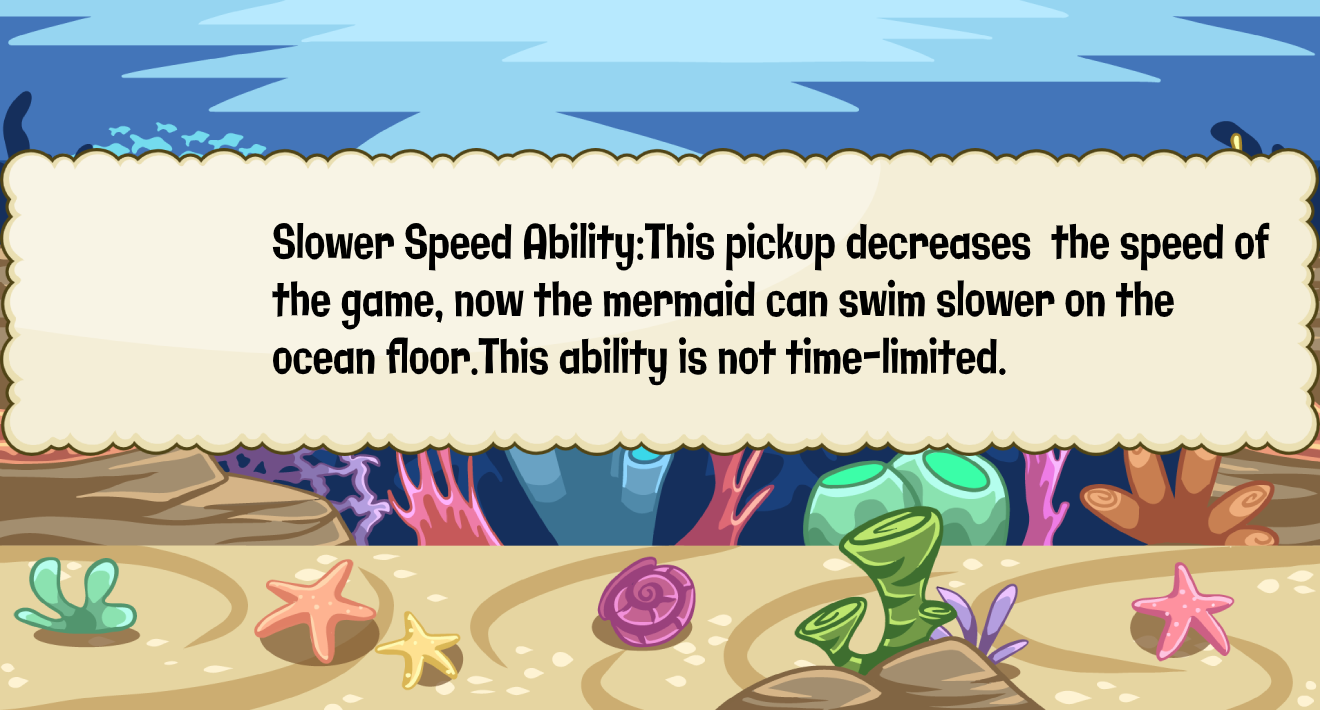
<style>
.page{position:relative;width:1320px;height:710px}
.page>*{position:absolute;margin:0}
.t1{font:47.9px "Galindo-Regular";color:#000000;scale:0.71 1}
</style>
<div class="page">
<p class="t1" style="left:272px;top:222px;width:998px;height:164px">Slower Speed Ability:This pickup decreases  the speed of  <br>the game, now the mermaid can swim slower on the <br>ocean floor.This ability is not time-limited.</p>
</div>
